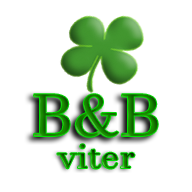
<style>
.page{position:relative;width:192px;height:192px;background:#ffffff}
.page>*{position:absolute;margin:0}
.t1{font:58.8px "JavaneseText";scale:1.04 1}
.t2{font:35.5px "JavaneseText";scale:1.07 1}
</style>
<div class="page">
<p class="t1" style="left:34px;top:94px;width:124px;height:43px">B&amp;B</p>
<p class="t2" style="left:57px;top:144px;width:78px;height:25px">viter</p>
</div>
